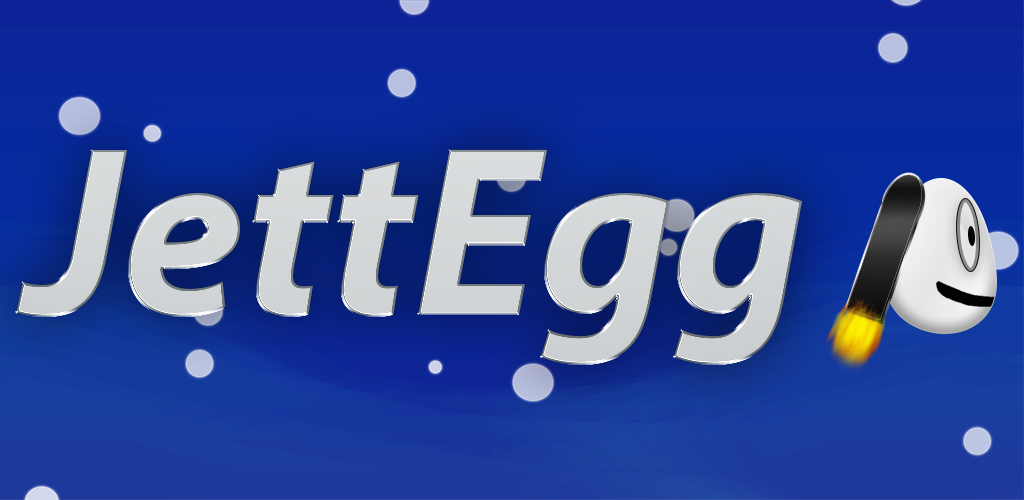
<style>
.page{position:relative;width:1024px;height:500px}
.page>*{position:absolute;margin:0}
.t1{font:243.6px "MyriadPro-BoldIt";color:#d3d6d7}
</style>
<div class="page">
<p class="t1" style="left:16px;top:149px;width:786px;height:215px">JettEgg</p>
</div>
